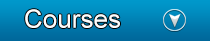
<style>
.page{position:relative;width:210px;height:41px}
.page>*{position:absolute;margin:0}
.t1{font:25.4px "ArialMT";color:#fcfcfc}
</style>
<div class="page">
<p class="t1" style="left:25px;top:9px;width:95px;height:19px">Courses</p>
</div>
